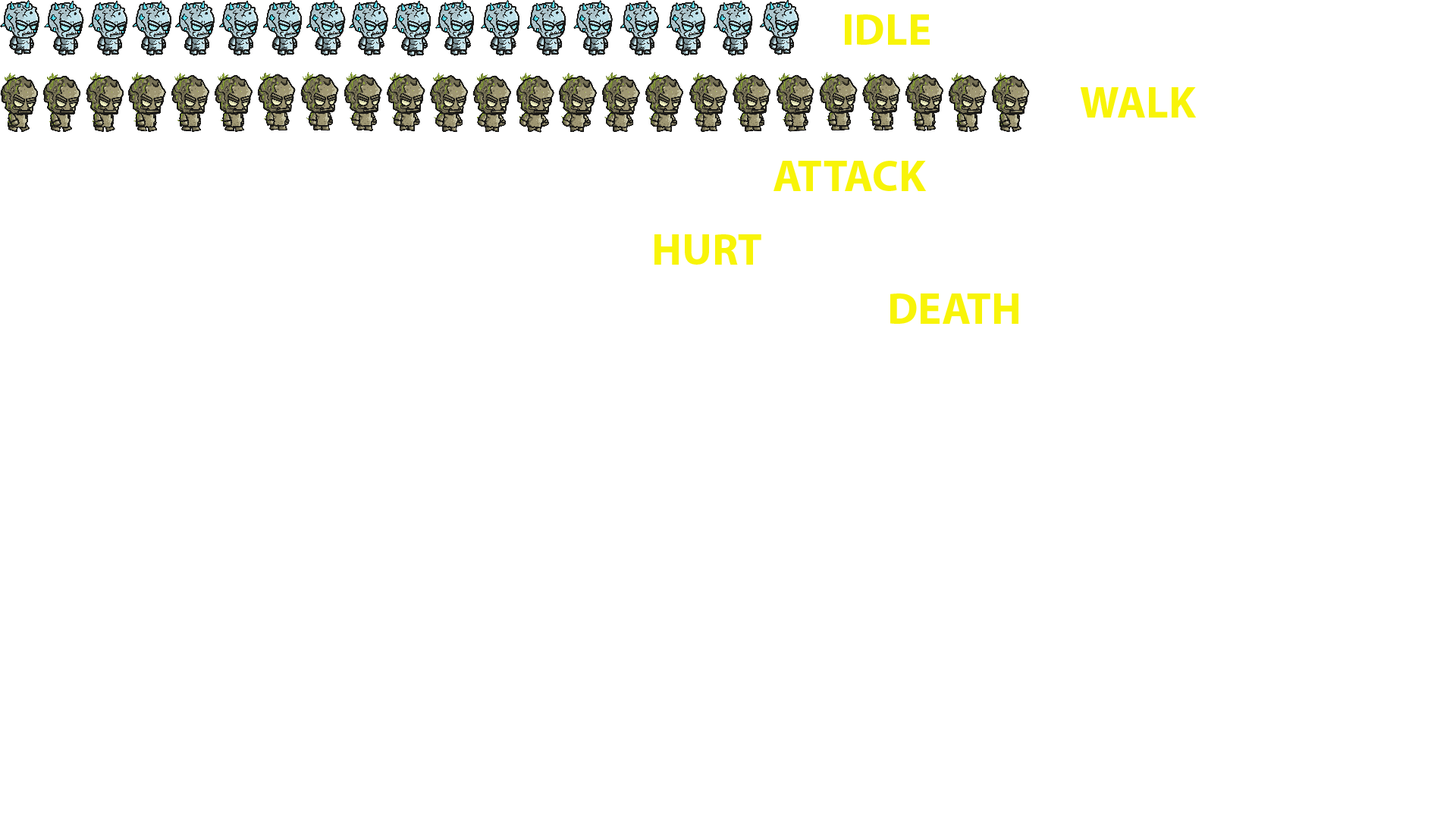
<style>
.page{position:relative;width:1456px;height:819px;background:#ffffff}
.page>*{position:absolute;margin:0}
.t1{font:44.2px "MyriadPro-Bold";color:#f8f408}
</style>
<div class="page">
<p class="t1" style="left:845px;top:14px;width:85px;height:31px">IDLE</p>
<p class="t1" style="left:1080px;top:87px;width:116px;height:31px">WALK</p>
<p class="t1" style="left:773px;top:161px;width:154px;height:30px">ATTACK</p>
<p class="t1" style="left:654px;top:234px;width:107px;height:31px">HURT</p>
<p class="t1" style="left:890px;top:293px;width:128px;height:31px">DEATH</p>
</div>
